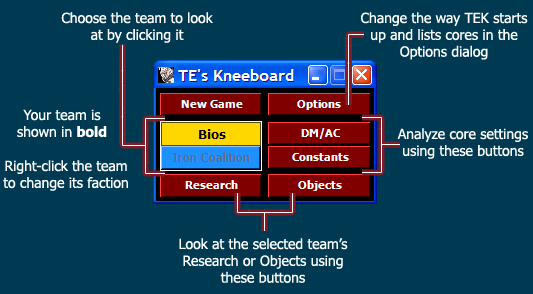
<style>
.page{position:relative;width:533px;height:294px;background:#003952}
.page>*{position:absolute;margin:0}
.t1{font:14px "Tahoma";color:#ffffff}
.t2{font:14px "Tahoma-Bold";color:#ffffff}
</style>
<div class="page">
<p class="t1" style="left:61px;top:12px;width:152px;height:31px;text-align:center">Choose the team to look<br>at by clicking it</p>
<p class="t1" style="left:361px;top:12px;width:167px;height:48px;text-align:center">Change the way TEK starts<br>up and lists cores in the<br>Options dialog</p>
<p class="t1" style="left:17px;top:109px;width:90px;height:29px;text-align:center">Your team is<br>shown in <span class="t2">bold</span></p>
<p class="t1" style="left:397px;top:128px;width:131px;height:31px;text-align:center">Analyze core settings<br>using these buttons</p>
<p class="t1" style="left:3px;top:160px;width:125px;height:31px;text-align:center">Right-click the team<br>to change its faction</p>
<p class="t1" style="left:179px;top:238px;width:169px;height:45px;text-align:center">Look at the selected team’s<br>Research or Objects using<br>these buttons</p>
</div>
